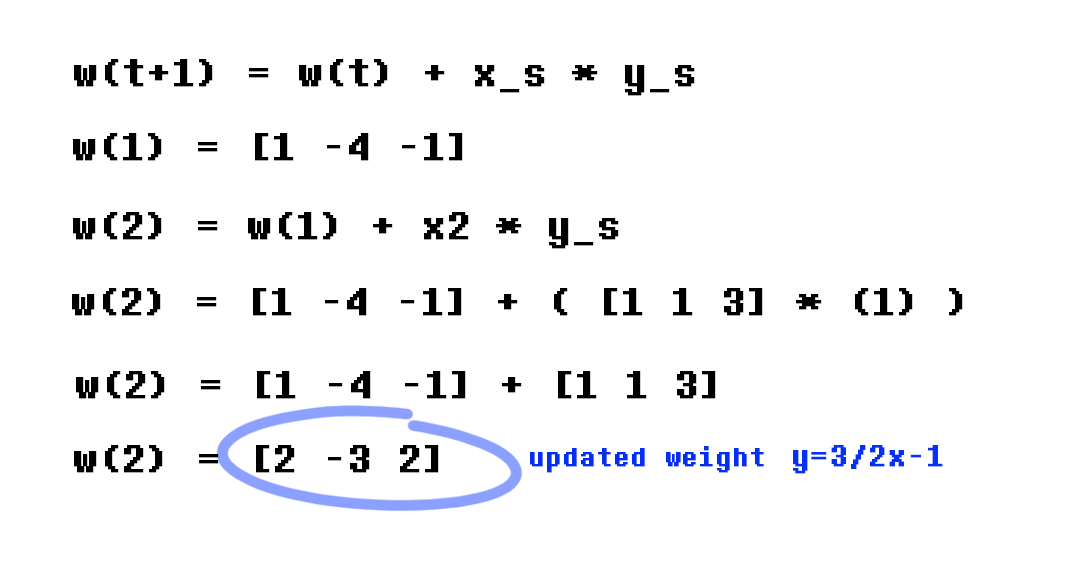
<style>
.page{position:relative;width:1080px;height:587px;background:#ffffff}
.page>*{position:absolute;margin:0}
.t1{font:40px "DeterminationMono";color:#000000;font-weight:bold}
.t2{font:27.1px "DeterminationMono";color:#032ff4;font-weight:bold}
.t3{font:30.8px "DeterminationMono";color:#0531f6;font-weight:bold}
</style>
<div class="page">
<p class="t1" style="left:74px;top:59px;width:621px;height:37px">w(t+1) = w(t) + x_s * y_s</p>
<p class="t1" style="left:73px;top:133px;width:390px;height:28px">w(1) = [1 -4 -1]</p>
<p class="t1" style="left:73px;top:212px;width:546px;height:37px">w(2) = w(1) + x2 * y_s</p>
<p class="t1" style="left:72px;top:288px;width:891px;height:28px">w(2) = [1 -4 -1] + ( [1 1 3] * (1) )</p>
<p class="t1" style="left:76px;top:371px;width:640px;height:28px">w(2) = [1 -4 -1] + [1 1 3]</p>
<p class="t1" style="left:74px;top:445px;width:365px;height:28px">w(2) = [2 -3 2]</p>
<p class="t2" style="left:530px;top:446px;width:234px;height:27px">updated weight</p>
<p class="t3" style="left:793px;top:445px;width:150px;height:29px">y=3/2x-1</p>
</div>
